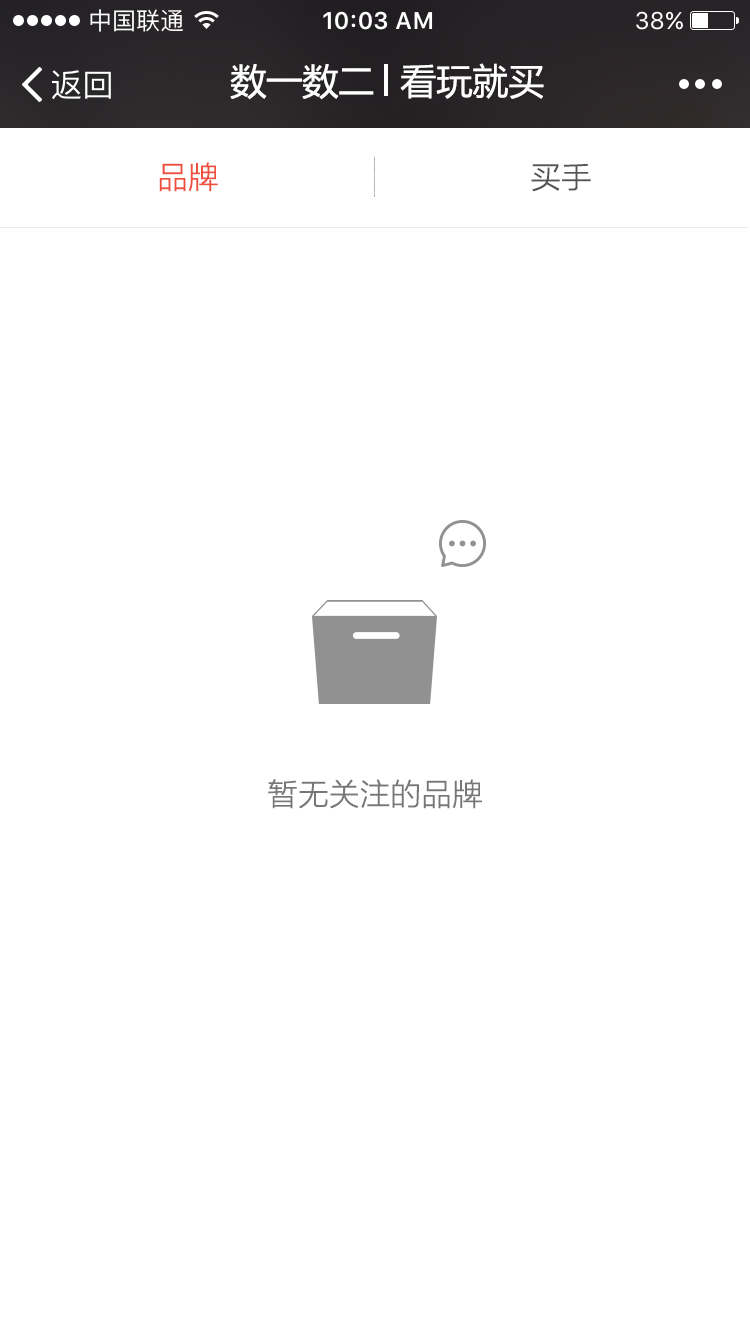
<style>
.page{position:relative;width:750px;height:1334px;background:#ffffff}
.page>*{position:absolute;margin:0}
.t1{font:36px "MicrosoftYaHei";color:#ffffff}
.t2{font:30px "MicrosoftYaHeiLight";color:#ef4f3e;font-weight:bold}
.t3{font:30px "MicrosoftYaHeiLight";color:#555555;font-weight:bold}
.t4{font:30px "MicrosoftYaHeiLight";color:#777777;font-weight:bold}
</style>
<div class="page">
<p class="t1" style="left:230px;top:63px;width:144px;height:37px">数一数二</p>
<p class="t1" style="left:400px;top:63px;width:144px;height:36px">看玩就买</p>
<p class="t2" style="left:159px;top:162px;width:59px;height:30px">品牌</p>
<p class="t3" style="left:531px;top:163px;width:60px;height:29px">买手</p>
<p class="t4" style="left:268px;top:779px;width:214px;height:30px">暂无关注的品牌</p>
</div>
